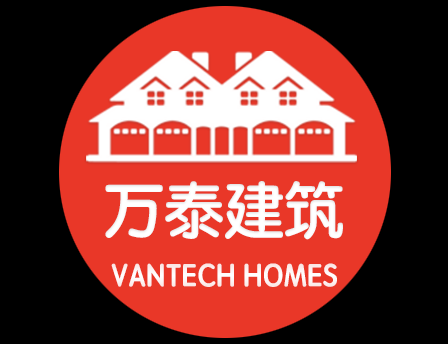
<style>
.page{position:relative;width:448px;height:344px;background:#000000}
.page>*{position:absolute;margin:0}
.t1{font:60px "STYuanti-SC-Bold";color:#ffffff}
.t2{font:32px "STYuanti-SC-Bold";color:#ffffff;scale:0.92 1}
</style>
<div class="page">
<p class="t1" style="left:105px;top:181px;width:238px;height:59px">万泰建筑</p>
<p class="t2" style="left:111px;top:263px;width:226px;height:24px">VANTECH HOMES</p>
</div>
